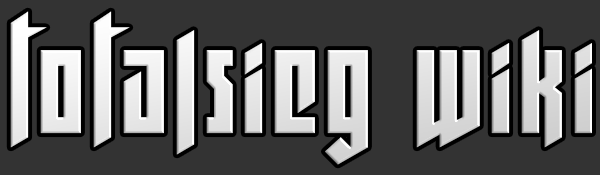
<style>
.page{position:relative;width:600px;height:175px;background:#333333}
.page>*{position:absolute;margin:0}
.t1{font:142.8px "Wolfenstein";letter-spacing:-0.075em;color:#e5e5e5}
</style>
<div class="page">
<p class="t1" style="left:10px;top:11px;width:582px;height:154px">t o t a l s i e g   w i k i</p>
</div>
